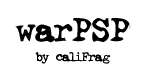
<style>
.page{position:relative;width:144px;height:80px;background:#ffffff}
.page>*{position:absolute;margin:0}
.t1{font:36px "Ghostwriter";color:#000000}
.t2{font:14px "Ghostwriter";color:#000000}
</style>
<div class="page">
<p class="t1" style="left:15px;top:18px;width:116px;height:25px">warPSP</p>
<p class="t2" style="left:35px;top:52px;width:76px;height:12px">by caliFrag</p>
</div>
